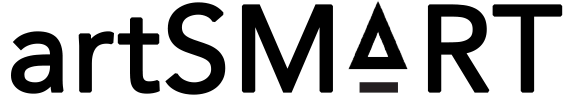
<style>
.page{position:relative;width:571px;height:101px;background:#ffffff}
.page>*{position:absolute;margin:0}
.t1{font:120px "Avenir-Roman";color:#000000;font-weight:bold}
</style>
<div class="page">
<p class="t1" style="left:11px;top:2px;width:552px;height:93px">artSM  RT</p>
</div>
